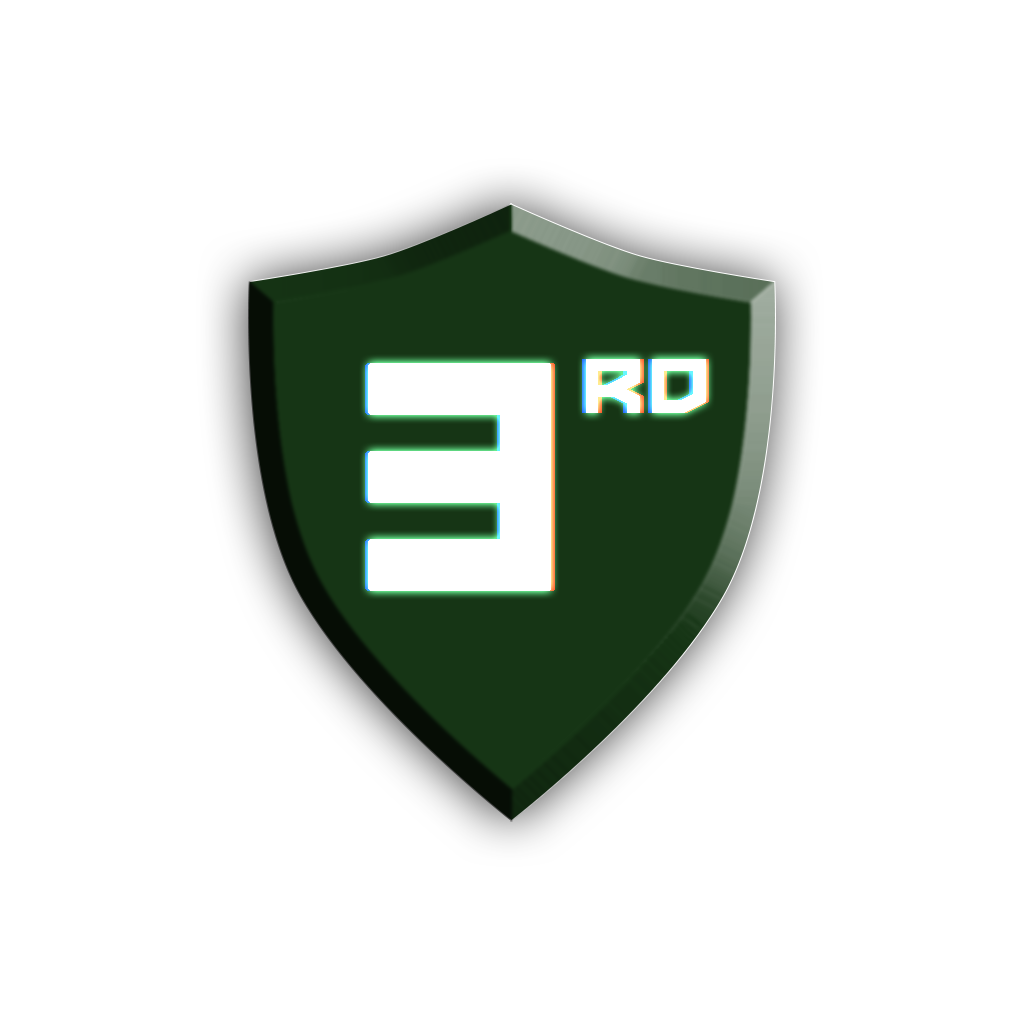
<style>
.page{position:relative;width:1024px;height:1024px;background:#ffffff}
.page>*{position:absolute;margin:0}
.t1{font:133.8px "LVDCCommon2";letter-spacing:0.04em;color:#ffffff;font-variant:small-caps}
.t2{font:396.5px "LVDCCommon2";letter-spacing:0.04em;color:#ffffff;font-variant:small-caps}
</style>
<div class="page">
<p class="t1" style="left:365px;top:359px;width:337px;height:232px"><span class="t2">3</span>rd</p>
<p class="t1" style="left:368px;top:359px;width:338px;height:232px"><span class="t2">3</span>rd</p>
<p class="t1" style="left:372px;top:359px;width:337px;height:232px"><span class="t2">3</span>rd</p>
</div>
